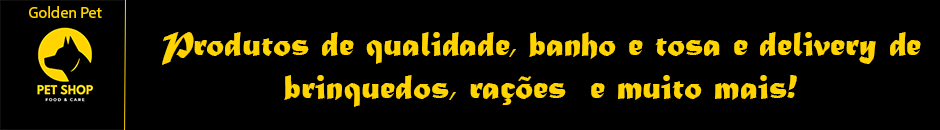
<style>
.page{position:relative;width:940px;height:130px;background:#000000}
.page>*{position:absolute;margin:0}
.t1{font:16px "MyriadPro-Regular";color:#ffd401}
.t2{font:36px "MaturaMTScriptCapitals";color:#ffd401}
</style>
<div class="page">
<p class="t1" style="left:29px;top:6px;width:73px;height:12px">Golden Pet</p>
<p class="t2" style="left:162px;top:32px;width:759px;height:75px;text-align:center">Produtos de qualidade, banho e tosa e delivery de brinquedos, rações  e muito mais!</p>
</div>
